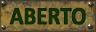
<style>
.page{position:relative;width:96px;height:32px}
.page>*{position:absolute;margin:0}
.t1{font:25.3px "Calibri-Bold";letter-spacing:-0.02em;color:#143900;font-weight:bold;scale:0.89 1}
</style>
<div class="page">
<p class="t1" style="left:9px;top:7px;width:77px;height:18px">ABERTO</p>
</div>
